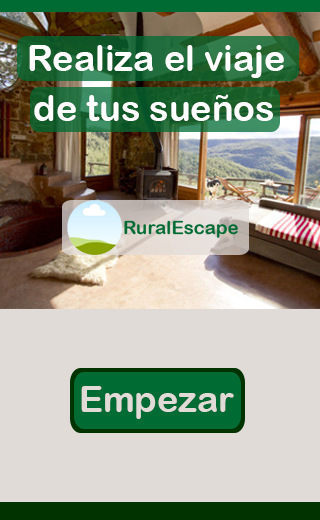
<style>
.page{position:relative;width:320px;height:520px;background:#e1dbd8}
.page>*{position:absolute;margin:0}
.t1{font:36px "ArialRoundedMTBold";color:#ffffff}
.t2{font:36px "ArialRoundedMTBold";color:#e1dbd8}
</style>
<div class="page">
<p class="t1" style="left:29px;top:45px;width:255px;height:33px">Realiza el viaje</p>
<p class="t1" style="left:34px;top:94px;width:239px;height:27px">de tus sueños</p>
<p class="t2" style="left:81px;top:386px;width:153px;height:33px">Empezar</p>
</div>
